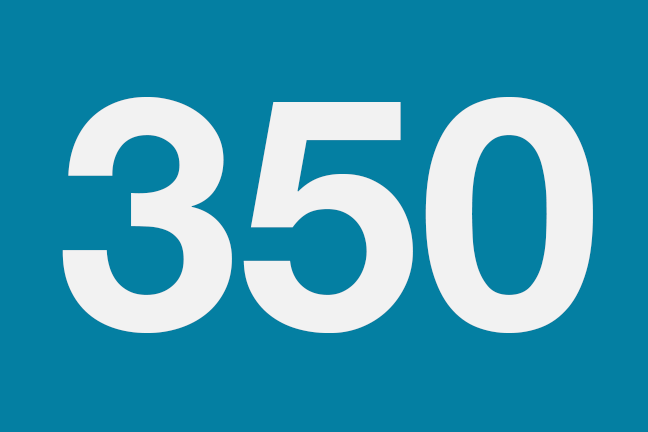
<style>
.page{position:relative;width:648px;height:432px;background:#047fa2}
.page>*{position:absolute;margin:0}
.t1{font:325px "HelveticaNeue-Bold";color:#f2f2f2}
</style>
<div class="page">
<p class="t1" style="left:62px;top:97px;width:531px;height:236px">350</p>
</div>
